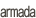
<style>
.page{position:relative;width:36px;height:18px;background:#ffffff}
.page>*{position:absolute;margin:0}
.t1{font:14px "GothicMB101Pro-Regular";letter-spacing:-0.08em;color:#4c4842;font-weight:bold;scale:0.72 1}
</style>
<div class="page">
<p class="t1" style="left:0px;top:5px;width:36px;height:13px">armada</p>
</div>
